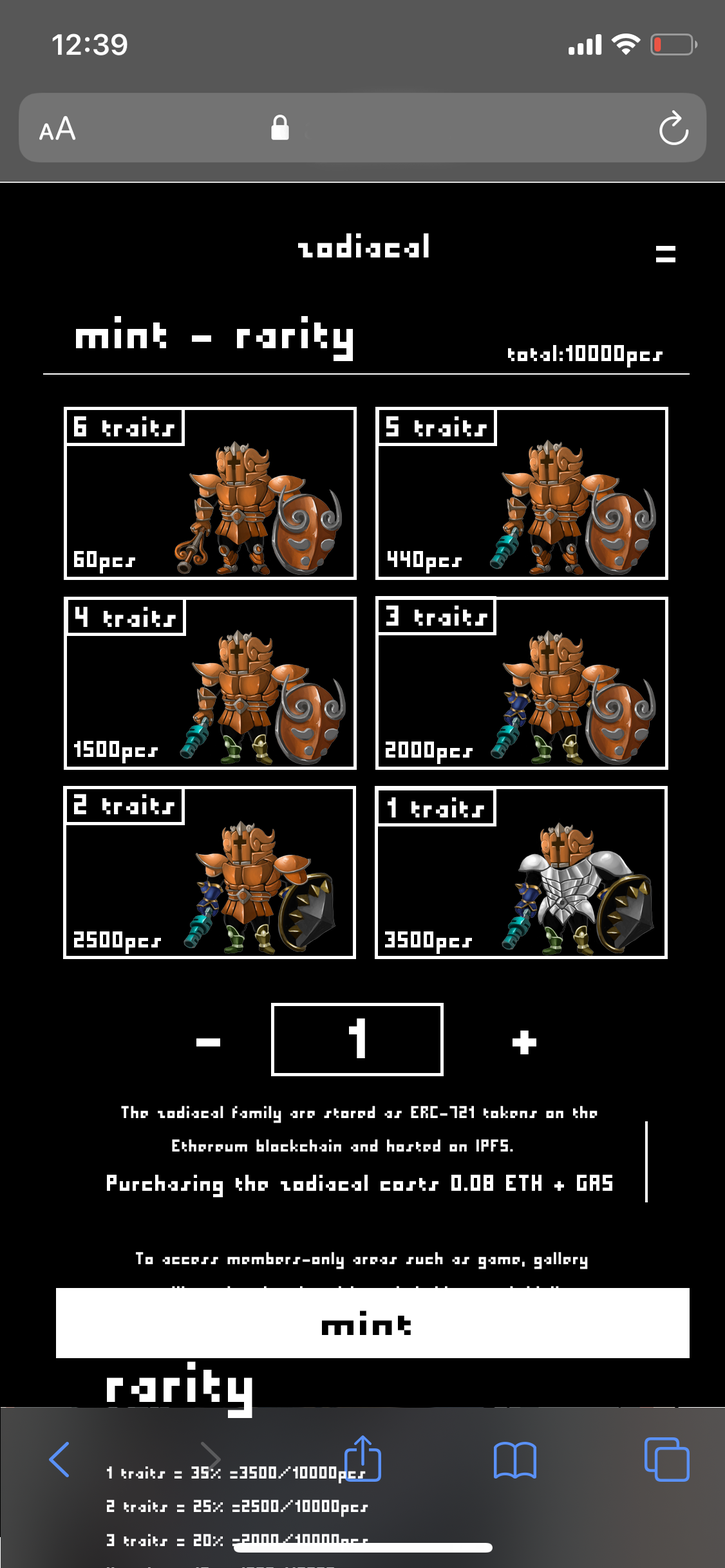
<style>
.page{position:relative;width:725px;height:1568px;background:#000000}
.page>*{position:absolute;margin:0}
.t1{font:38.6px "PixelMillennium";color:#ffffff}
.t2{font:51.5px "PixelMillennium";color:#ffffff}
.t3{font:25.7px "PixelMillennium";color:#ffffff}
.t4{font:32.2px "PixelMillennium";color:#ffffff}
.t5{font:63.5px "PixelMillennium";color:#ffffff}
.t6{font:38.6px "PixelMillennium";color:#000000;scale:1.31 1}
</style>
<div class="page">
<p class="t1" style="left:298px;top:233px;width:131px;height:24px">zodiacal</p>
<p class="t1" style="left:656px;top:246px;width:19px;height:5px">_</p>
<p class="t1" style="left:656px;top:257px;width:19px;height:6px">_</p>
<p class="t2" style="left:76px;top:316px;width:277px;height:45px">mint - rarity</p>
<p class="t3" style="left:508px;top:345px;width:154px;height:23px">total:10000pcs</p>
<p class="t4" style="left:74px;top:416px;width:100px;height:20px">6 traits</p>
<p class="t4" style="left:386px;top:416px;width:101px;height:20px">5 traits</p>
<p class="t3" style="left:74px;top:551px;width:61px;height:23px">60pcs</p>
<p class="t3" style="left:387px;top:551px;width:75px;height:23px">440pcs</p>
<p class="t4" style="left:386px;top:605px;width:101px;height:21px">3 traits</p>
<p class="t4" style="left:75px;top:606px;width:101px;height:21px">4 traits</p>
<p class="t3" style="left:74px;top:741px;width:84px;height:22px">1500pcs</p>
<p class="t3" style="left:386px;top:742px;width:86px;height:22px">2000pcs</p>
<p class="t4" style="left:74px;top:794px;width:100px;height:20px">2 traits</p>
<p class="t4" style="left:387px;top:797px;width:97px;height:20px">1 traits</p>
<p class="t3" style="left:74px;top:931px;width:87px;height:23px">2500pcs</p>
<p class="t3" style="left:385px;top:931px;width:87px;height:23px">3500pcs</p>
<p class="t5" style="left:349px;top:1018px;width:16px;height:40px">1</p>
<p class="t5" style="left:512px;top:1031px;width:24px;height:23px">+</p>
<p class="t5" style="left:196px;top:1038px;width:24px;height:9px">-</p>
<p class="t6" style="left:322px;top:1311px;width:89px;height:24px">mint</p>
</div>
